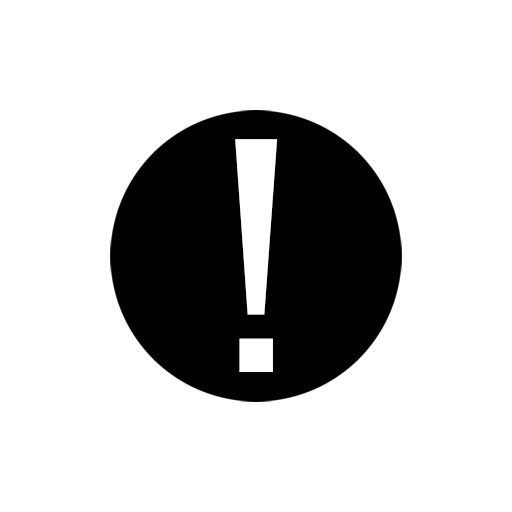
<style>
.page{position:relative;width:512px;height:512px;background:#ffffff}
.page>*{position:absolute;margin:0}
.t1{font:326.8px "DINAlternate-Bold";color:#ffffff}
</style>
<div class="page">
<p class="t1" style="left:235px;top:139px;width:43px;height:233px">!</p>
</div>
